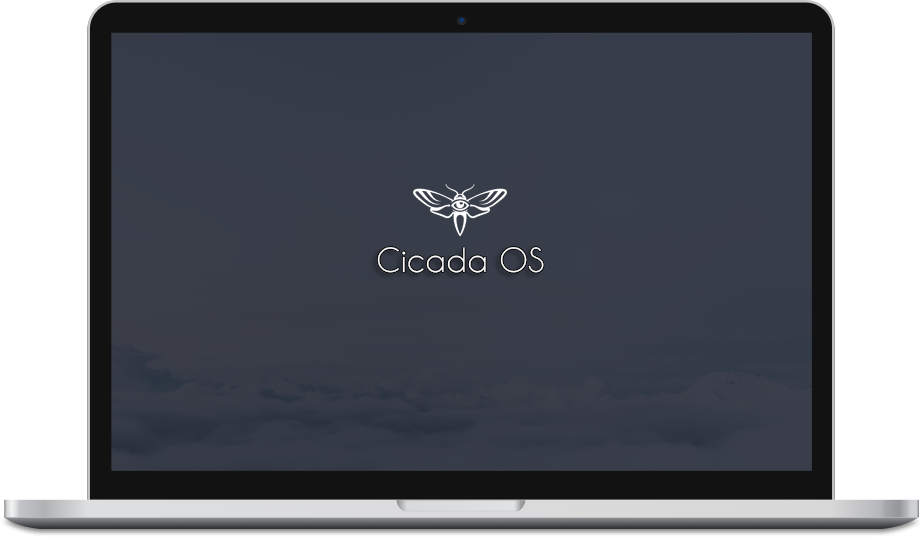
<style>
.page{position:relative;width:922px;height:537px}
.page>*{position:absolute;margin:0}
.t1{font:31.3px "CaviarDreams";color:#fefefe}
</style>
<div class="page">
<p class="t1" style="left:377px;top:247px;width:167px;height:26px">Cicada OS</p>
</div>
